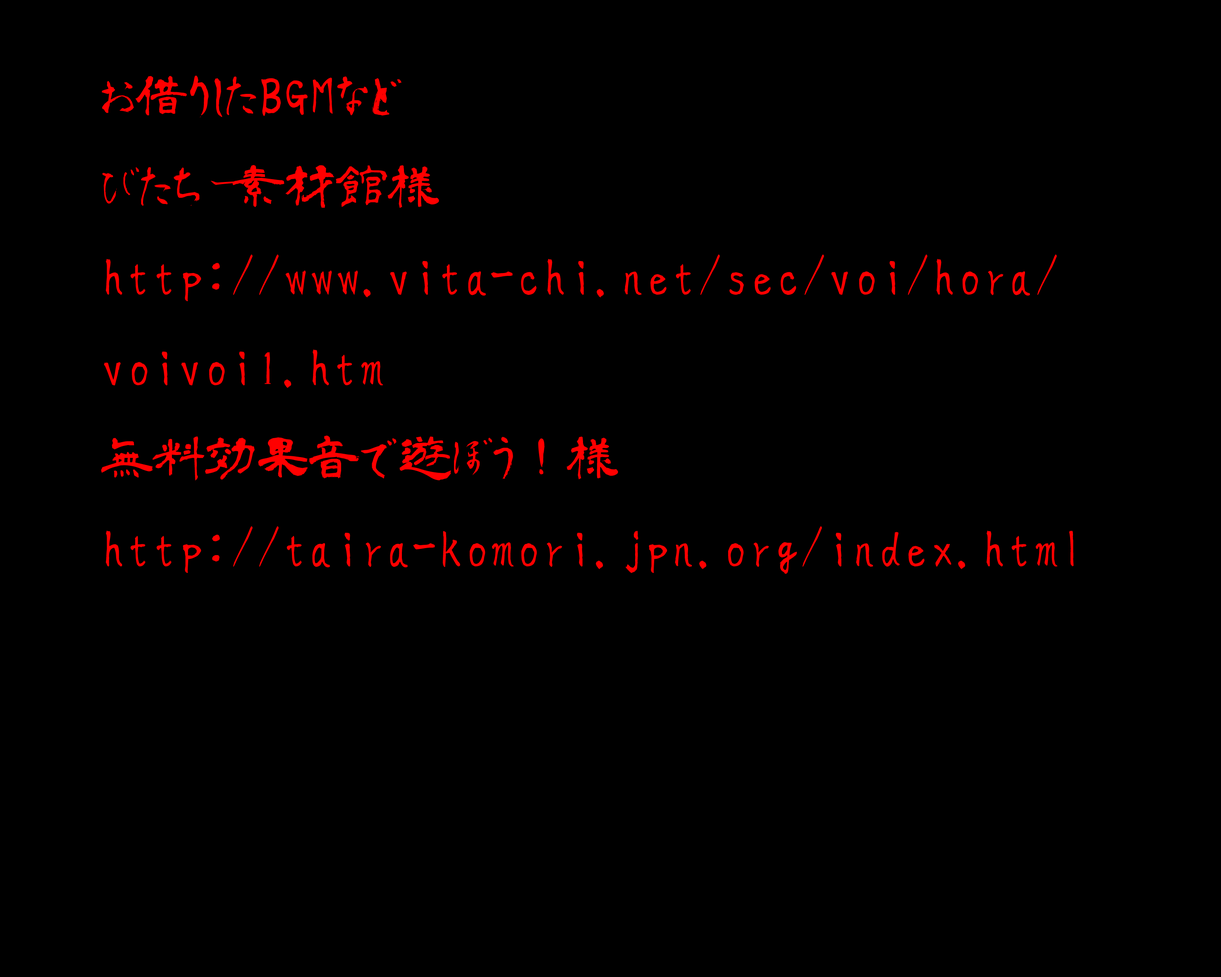
<style>
.page{position:relative;width:1221px;height:977px;background:#000000}
.page>*{position:absolute;margin:0}
.t1{font:51.7px "aoyagireisyosimo2";color:#ff0000}
</style>
<div class="page">
<p class="t1" style="left:101px;top:75px;width:973px;height:499px">お借りしたBGMなど<br>びたちー素材館様<br>http://www.vita-chi.net/sec/voi/hora/<br>voivoi1.htm<br>無料効果音で遊ぼう！様<br>http://taira-komori.jpn.org/index.html</p>
</div>
